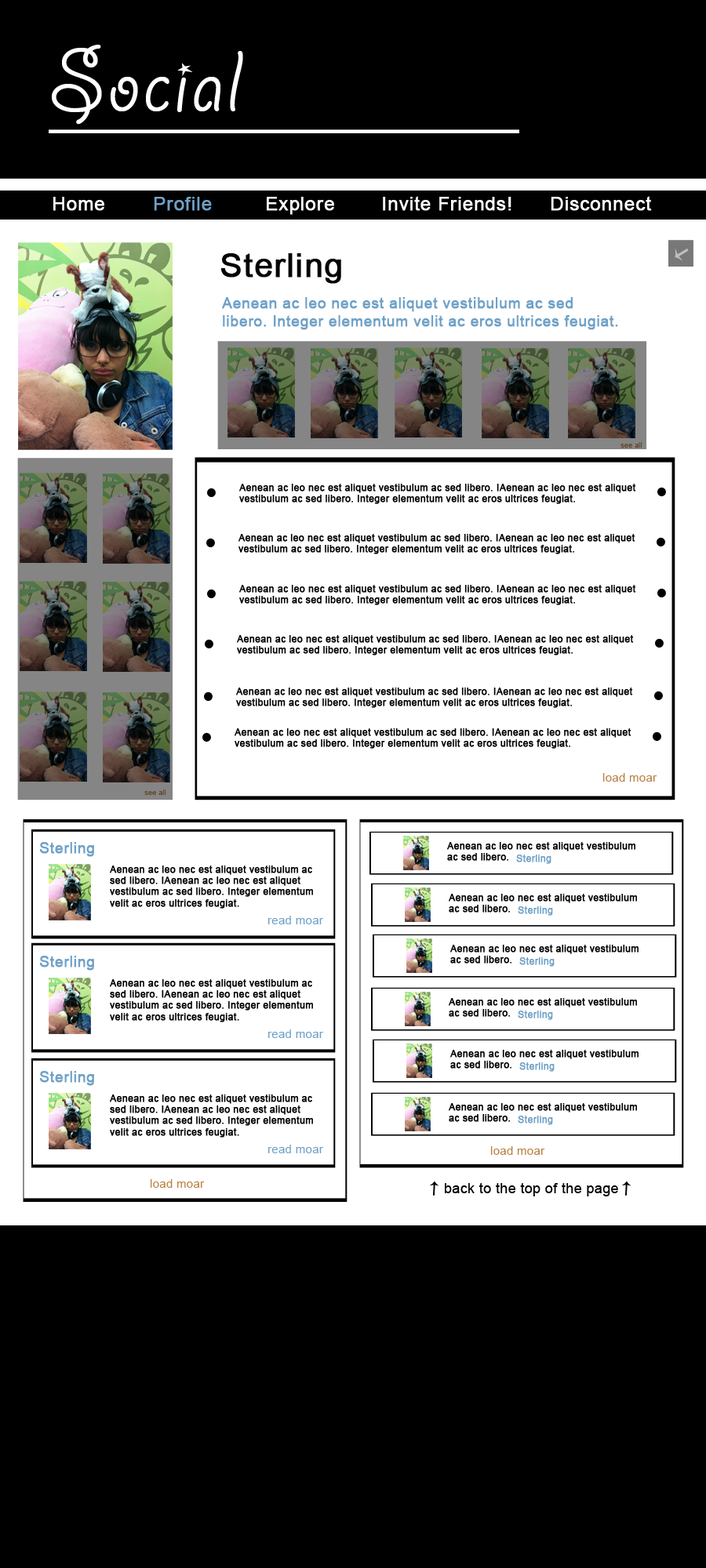
<style>
.page{position:relative;width:706px;height:1568px;background:#ffffff}
.page>*{position:absolute;margin:0}
.t1{font:97.2px "GiddyupStd";letter-spacing:0.02em;color:#ffffff}
.t2{font:18.8px "ArialMT";letter-spacing:0.02em;color:#ffffff;font-weight:bold}
.t3{font:18.8px "ArialMT";letter-spacing:0.02em;color:#6fa1c7;font-weight:bold}
.t4{font:32.9px "ArialMT";letter-spacing:0.02em;color:#050505;font-weight:bold}
.t5{font:14.9px "ArialMT";letter-spacing:0.02em;color:#6fa1c7;font-weight:bold}
.t6{font:7.1px "ArialMT";letter-spacing:0.02em;color:#614322}
.t7{font:9.4px "ArialMT";letter-spacing:0.02em;color:#000000;font-weight:bold}
.t8{font:11.8px "ArialMT";letter-spacing:0.02em;color:#ba8042}
.t9{font:9.4px "ArialMT";letter-spacing:0.02em;color:#6fa1c7;font-weight:bold}
.t10{font:11.8px "ArialMT";letter-spacing:0.02em;color:#6fa1c7}
.t11{font:14.1px "ArialMT";letter-spacing:0.02em;color:#000000}
</style>
<div class="page">
<p class="t1" style="left:52px;top:45px;width:191px;height:80px">Social</p>
<p class="t2" style="left:53px;top:197px;width:51px;height:14px">Home</p>
<p class="t3" style="left:154px;top:197px;width:58px;height:14px">Profile</p>
<p class="t2" style="left:267px;top:197px;width:67px;height:18px">Explore</p>
<p class="t2" style="left:383px;top:196px;width:128px;height:15px">Invite Friends!</p>
<p class="t2" style="left:550px;top:196px;width:102px;height:15px">Disconnect</p>
<p class="t4" style="left:220px;top:253px;width:121px;height:31px">Sterling</p>
<p class="t5" style="left:222px;top:297px;width:396px;height:33px">Aenean ac leo nec est aliquet vestibulum ac sed libero. Integer elementum velit ac eros ultrices feugiat.</p>
<p class="t6" style="left:620px;top:442px;width:21px;height:6px">see all</p>
<p class="t7" style="left:239px;top:484px;width:397px;height:20px">Aenean ac leo nec est aliquet vestibulum ac sed libero. IAenean ac leo nec est aliquet vestibulum ac sed libero. Integer elementum velit ac eros ultrices feugiat.</p>
<p class="t7" style="left:238px;top:534px;width:397px;height:20px">Aenean ac leo nec est aliquet vestibulum ac sed libero. IAenean ac leo nec est aliquet vestibulum ac sed libero. Integer elementum velit ac eros ultrices feugiat.</p>
<p class="t7" style="left:239px;top:585px;width:397px;height:20px">Aenean ac leo nec est aliquet vestibulum ac sed libero. IAenean ac leo nec est aliquet vestibulum ac sed libero. Integer elementum velit ac eros ultrices feugiat.</p>
<p class="t7" style="left:237px;top:635px;width:396px;height:20px">Aenean ac leo nec est aliquet vestibulum ac sed libero. IAenean ac leo nec est aliquet vestibulum ac sed libero. Integer elementum velit ac eros ultrices feugiat.</p>
<p class="t7" style="left:236px;top:688px;width:397px;height:20px">Aenean ac leo nec est aliquet vestibulum ac sed libero. IAenean ac leo nec est aliquet vestibulum ac sed libero. Integer elementum velit ac eros ultrices feugiat.</p>
<p class="t7" style="left:234px;top:728px;width:397px;height:21px">Aenean ac leo nec est aliquet vestibulum ac sed libero. IAenean ac leo nec est aliquet vestibulum ac sed libero. Integer elementum velit ac eros ultrices feugiat.</p>
<p class="t8" style="left:602px;top:773px;width:55px;height:9px">load moar</p>
<p class="t6" style="left:144px;top:789px;width:21px;height:6px">see all</p>
<p class="t5" style="left:39px;top:842px;width:55px;height:15px">Sterling</p>
<p class="t7" style="left:447px;top:842px;width:188px;height:19px">Aenean ac leo nec est aliquet vestibulum ac sed libero.</p>
<p class="t9" style="left:516px;top:855px;width:35px;height:9px">Sterling</p>
<p class="t7" style="left:110px;top:866px;width:203px;height:43px">Aenean ac leo nec est aliquet vestibulum ac sed libero. IAenean ac leo nec est aliquet vestibulum ac sed libero. Integer elementum velit ac eros ultrices feugiat.</p>
<p class="t7" style="left:448px;top:894px;width:189px;height:19px">Aenean ac leo nec est aliquet vestibulum ac sed libero.</p>
<p class="t10" style="left:267px;top:916px;width:56px;height:8px">read moar</p>
<p class="t9" style="left:517px;top:906px;width:36px;height:10px">Sterling</p>
<p class="t7" style="left:450px;top:945px;width:188px;height:19px">Aenean ac leo nec est aliquet vestibulum ac sed libero.</p>
<p class="t5" style="left:39px;top:956px;width:55px;height:15px">Sterling</p>
<p class="t9" style="left:519px;top:957px;width:35px;height:10px">Sterling</p>
<p class="t7" style="left:110px;top:979px;width:203px;height:43px">Aenean ac leo nec est aliquet vestibulum ac sed libero. IAenean ac leo nec est aliquet vestibulum ac sed libero. Integer elementum velit ac eros ultrices feugiat.</p>
<p class="t7" style="left:448px;top:998px;width:189px;height:19px">Aenean ac leo nec est aliquet vestibulum ac sed libero.</p>
<p class="t9" style="left:517px;top:1011px;width:36px;height:9px">Sterling</p>
<p class="t10" style="left:267px;top:1029px;width:56px;height:9px">read moar</p>
<p class="t7" style="left:450px;top:1050px;width:188px;height:19px">Aenean ac leo nec est aliquet vestibulum ac sed libero.</p>
<p class="t5" style="left:39px;top:1071px;width:55px;height:15px">Sterling</p>
<p class="t9" style="left:519px;top:1062px;width:35px;height:10px">Sterling</p>
<p class="t7" style="left:110px;top:1094px;width:203px;height:44px">Aenean ac leo nec est aliquet vestibulum ac sed libero. IAenean ac leo nec est aliquet vestibulum ac sed libero. Integer elementum velit ac eros ultrices feugiat.</p>
<p class="t7" style="left:448px;top:1103px;width:189px;height:19px">Aenean ac leo nec est aliquet vestibulum ac sed libero.</p>
<p class="t9" style="left:517px;top:1116px;width:36px;height:9px">Sterling</p>
<p class="t10" style="left:267px;top:1145px;width:56px;height:8px">read moar</p>
<p class="t8" style="left:490px;top:1146px;width:55px;height:9px">load moar</p>
<p class="t8" style="left:150px;top:1179px;width:55px;height:9px">load moar</p>
<p class="t11" style="left:445px;top:1183px;width:173px;height:13px">back to the top of the page</p>
</div>
